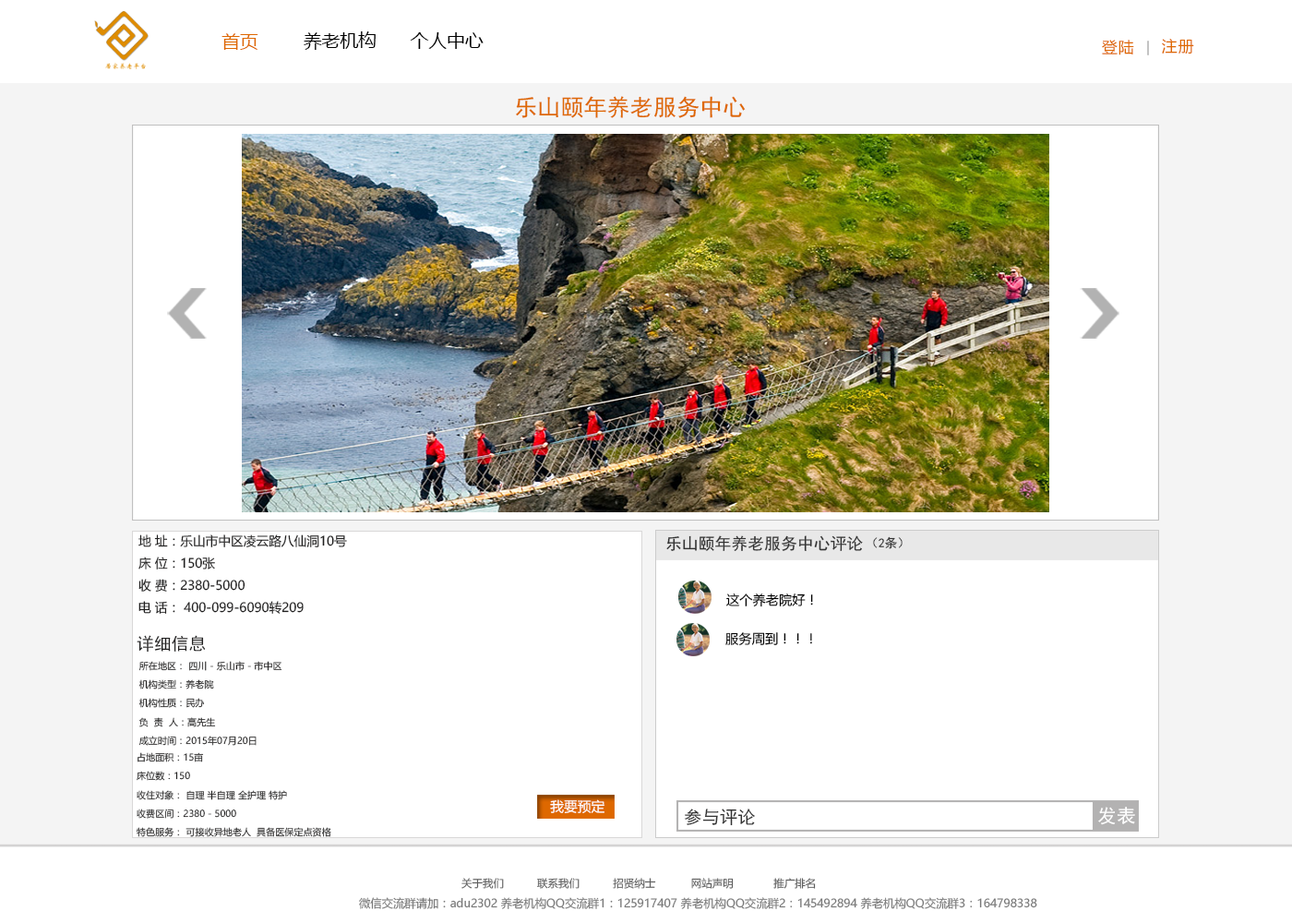
<style>
.page{position:relative;width:1292px;height:923px;background:#ffffff}
.page>*{position:absolute;margin:0}
.t1{font:18px "MicrosoftYaHei";color:#de6800}
.t2{font:18px "MicrosoftYaHei";color:#000000}
.t3{font:15.5px "MicrosoftYaHei";letter-spacing:0.06em;color:#de6800}
.t4{font:23.2px "SimHei";color:#de6800}
.t5{font:12.6px/22.1px "MicrosoftYaHei";color:#212020}
.t6{font:16.2px "SimHei";color:#333333}
.t7{font:12.6px "SimHei";color:#333333}
.t8{font:13.2px "MicrosoftYaHei";color:#000000}
.t9{font:17.3px "SimHei";color:#212020}
.t10{font:9.3px/18.6px "MicrosoftYaHei";color:#212020}
.t11{font:13.7px "MicrosoftYaHei";color:#ffffff}
.t12{font:17.9px "SimHei";color:#333333}
.t13{font:19px "SimHei";color:#ffffff}
.t14{font:10.7px "MicrosoftYaHei";color:#5f5f5f}
.t15{font:11.5px "MicrosoftYaHei";color:#797979}
</style>
<div class="page">
<p class="t1" style="left:221px;top:33px;width:37px;height:17px">首页</p>
<p class="t2" style="left:304px;top:31px;width:72px;height:19px">养老机构</p>
<p class="t2" style="left:410px;top:32px;width:74px;height:17px">个人中心</p>
<p class="t3" style="left:1102px;top:40px;width:32px;height:15px">登陆</p>
<p class="t3" style="left:1162px;top:39px;width:32px;height:15px">注册</p>
<p class="t4" style="left:516px;top:96px;width:230px;height:22px">乐山颐年养老服务中心</p>
<p class="t5" style="left:138px;top:534px;width:209px;height:80px">地 址：乐山市中区凌云路八仙洞10号<br>床 位：150张<br>收 费：2380-5000<br>电 话： 400-099-6090转209</p>
<p class="t6" style="left:666px;top:535px;width:197px;height:16px">乐山颐年养老服务中心评论</p>
<p class="t7" style="left:873px;top:536px;width:30px;height:13px">（2条）</p>
<p class="t8" style="left:726px;top:593px;width:87px;height:14px">这个养老院好！</p>
<p class="t9" style="left:137px;top:635px;width:69px;height:17px">详细信息</p>
<p class="t8" style="left:725px;top:632px;width:87px;height:14px">服务周到！！！</p>
<p class="t10" style="left:138px;top:661px;width:144px;height:85px">所在地区： 四川 - 乐山市 - 市中区<br>机构类型：养老院<br>机构性质：民办<br>负  责  人：高先生<br>成立时间：2015年07月20日</p>
<p class="t10" style="left:136px;top:752px;width:195px;height:85px">占地面积：15亩<br>床位数：150<br>收住对象： 自理 半自理 全护理 特护 <br>收费区间：2380 - 5000<br>特色服务： 可接收异地老人  具备医保定点资格</p>
<p class="t11" style="left:550px;top:799px;width:54px;height:14px">我要预定</p>
<p class="t12" style="left:684px;top:808px;width:71px;height:18px">参与评论</p>
<p class="t13" style="left:1098px;top:807px;width:37px;height:18px">发表</p>
<p class="t14" style="left:461px;top:878px;width:43px;height:11px">关于我们</p>
<p class="t14" style="left:537px;top:878px;width:43px;height:11px">联系我们</p>
<p class="t14" style="left:613px;top:878px;width:43px;height:11px">招贤纳士</p>
<p class="t14" style="left:691px;top:878px;width:43px;height:11px">网站声明</p>
<p class="t14" style="left:773px;top:878px;width:43px;height:11px">推广排名</p>
<p class="t15" style="left:359px;top:897px;width:678px;height:12px">微信交流群请加：adu2302 养老机构QQ交流群1：125917407 养老机构QQ交流群2：145492894 养老机构QQ交流群3：164798338</p>
</div>
